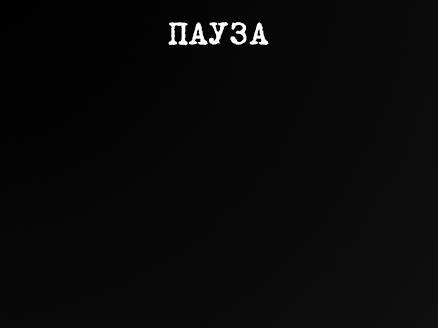
<style>
.page{position:relative;width:438px;height:328px}
.page>*{position:absolute;margin:0}
.t1{font:36px "B52";color:#ffffff}
</style>
<div class="page">
<p class="t1" style="left:168px;top:22px;width:101px;height:24px">ПАУЗА</p>
</div>
